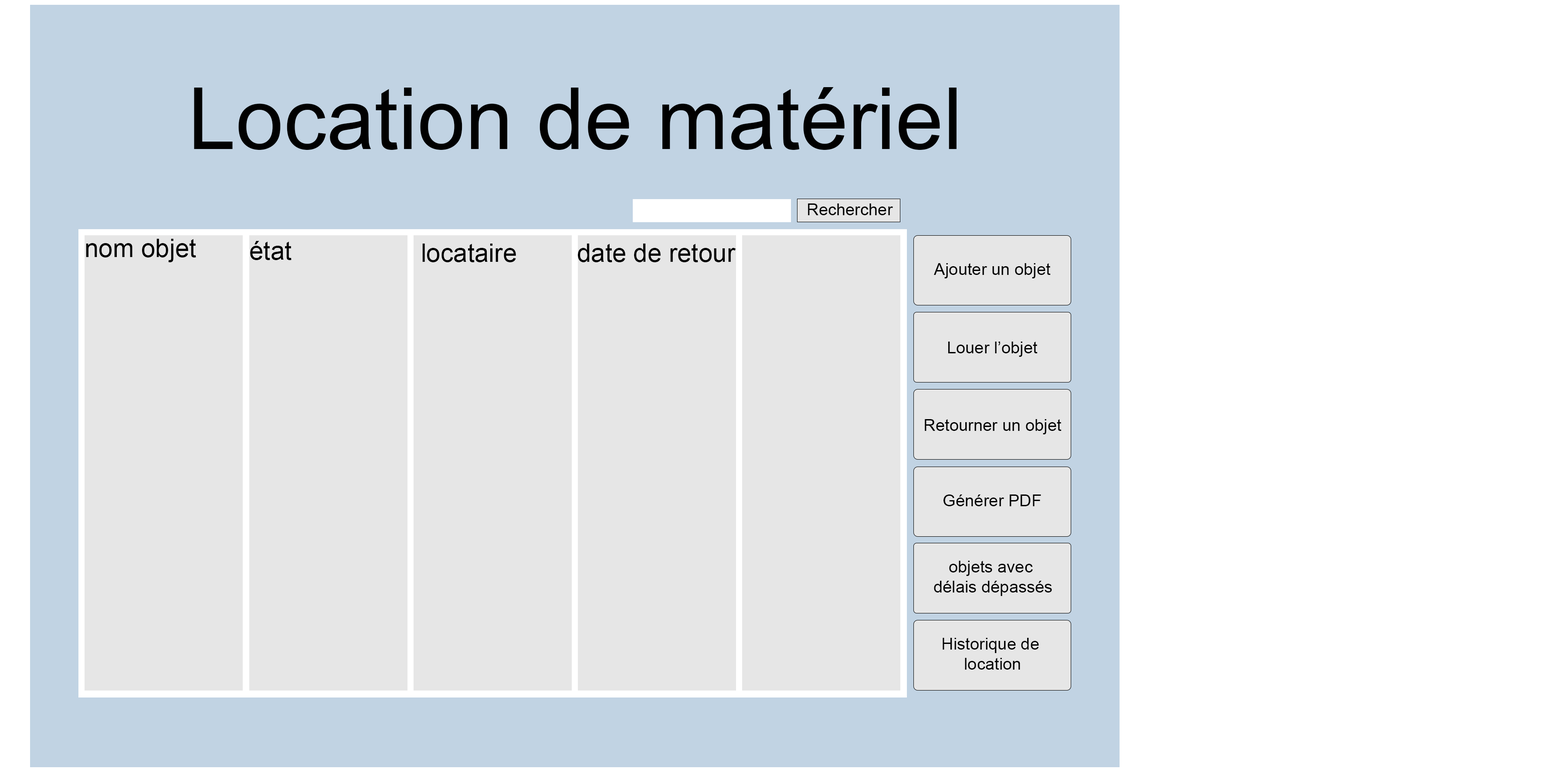
<style>
.page{position:relative;width:1544px;height:772px;background:#e6e6e6}
.page>*{position:absolute;margin:0}
.t1{font:86px "ArialMT";color:#010101}
.t2{font:16.6px "ArialMT";color:#010101}
.t3{font:25.4px "ArialMT";color:#010101}
</style>
<div class="page">
<p class="t1" style="left:194px;top:87px;width:763px;height:63px">Location de matériel</p>
<p class="t2" style="left:808px;top:204px;width:85px;height:11px">Rechercher</p>
<p class="t3" style="left:86px;top:239px;width:110px;height:23px">nom objet</p>
<p class="t3" style="left:250px;top:241px;width:42px;height:19px">état</p>
<p class="t3" style="left:422px;top:244px;width:94px;height:18px">locataire</p>
<p class="t3" style="left:578px;top:244px;width:158px;height:18px">date de retour</p>
<p class="t2" style="left:934px;top:263px;width:117px;height:15px">Ajouter un objet</p>
<p class="t2" style="left:948px;top:342px;width:90px;height:15px">Louer l’objet</p>
<p class="t2" style="left:925px;top:419px;width:137px;height:16px">Retourner un objet</p>
<p class="t2" style="left:944px;top:495px;width:97px;height:11px">Générer PDF</p>
<p class="t2" style="left:934px;top:561px;width:118px;height:35px;text-align:center">objets avec <br>délais dépassés</p>
<p class="t2" style="left:943px;top:638px;width:96px;height:32px;text-align:center">Historique de <br>location</p>
</div>
